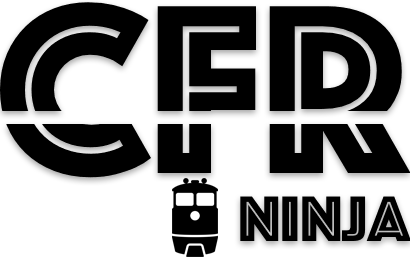
<style>
.page{position:relative;width:410px;height:260px;background:#000000}
.page>*{position:absolute;margin:0}
.t1{font:250px "Phosphate-Inline";color:#000000}
.t2{font:66.7px "Phosphate-Inline";color:#000000}
</style>
<div class="page">
<p class="t1" style="left:0px;top:2px;width:411px;height:176px">CFR</p>
<p class="t2" style="left:240px;top:196px;width:171px;height:45px">Ninja</p>
</div>
